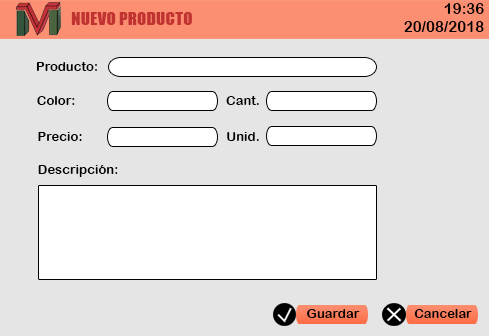
<style>
.page{position:relative;width:489px;height:336px;background:#e5e5e5}
.page>*{position:absolute;margin:0}
.t1{font:14.7px "ArialRoundedMTBold";color:#000000;scale:1.03 1}
.t2{font:17.3px "Impact";color:#c13331}
.t3{font:13px "ArialRoundedMTBold";color:#000000}
</style>
<div class="page">
<p class="t1" style="left:444px;top:3px;width:40px;height:11px">19:36</p>
<p class="t2" style="left:71px;top:12px;width:121px;height:13px">NUEVO PRODUCTO</p>
<p class="t1" style="left:404px;top:21px;width:80px;height:11px">20/08/2018</p>
<p class="t3" style="left:36px;top:62px;width:61px;height:9px">Producto:</p>
<p class="t3" style="left:37px;top:96px;width:38px;height:9px">Color:</p>
<p class="t3" style="left:226px;top:96px;width:33px;height:9px">Cant.</p>
<p class="t3" style="left:38px;top:132px;width:44px;height:9px">Precio:</p>
<p class="t3" style="left:227px;top:132px;width:32px;height:9px">Unid.</p>
<p class="t3" style="left:38px;top:165px;width:80px;height:12px">Descripción:</p>
<p class="t3" style="left:307px;top:309px;width:53px;height:9px">Guardar</p>
<p class="t3" style="left:414px;top:309px;width:58px;height:9px">Cancelar</p>
</div>
